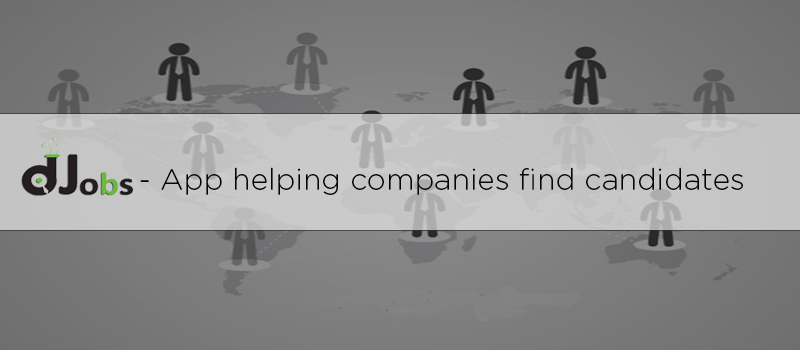
<style>
.page{position:relative;width:800px;height:350px}
.page>*{position:absolute;margin:0}
.t1{font:30px "GothamRounded-Light";color:#050505}
</style>
<div class="page">
<p class="t1" style="left:140px;top:167px;width:603px;height:28px">- App helping companies find candidates</p>
</div>
